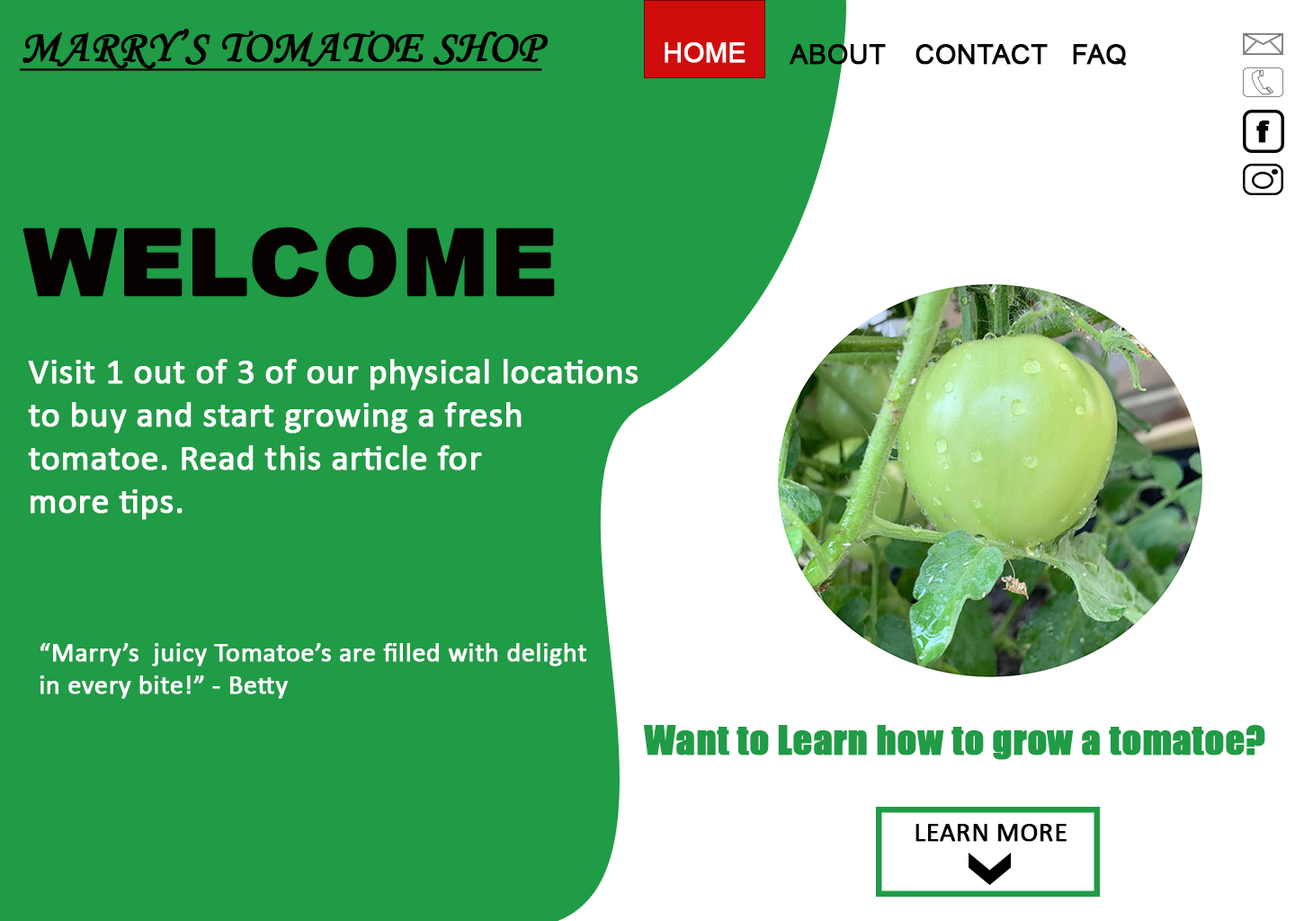
<style>
.page{position:relative;width:1295px;height:921px;background:#209b46}
.page>*{position:absolute;margin:0}
.t1{font:45.5px "MonotypeCorsiva";color:#060000;text-transform:uppercase;font-weight:bold;text-decoration:underline}
.t2{font:27px "ArialMT";color:#ffffff;font-weight:bold}
.t3{font:27px "ArialMT";color:#060000;font-weight:bold}
.t4{font:29.9px "Arial-Black";color:#060000;font-weight:bold}
.t5{font:91.7px "Arial-Black";color:#060000;font-weight:bold}
.t6{font:36px "Calibri";color:#ffffff;font-weight:bold}
.t7{font:27px "Calibri";color:#ffffff;font-weight:bold}
.t8{font:37.8px "Impact";color:#209b46;font-weight:bold}
.t9{font:27px "Calibri";color:#060000;font-weight:bold}
</style>
<div class="page">
<p class="t1" style="left:20px;top:29px;width:528px;height:42px">Marry’s Tomatoe Shop</p>
<p class="t2" style="left:665px;top:42px;width:80px;height:21px">HOME</p>
<p class="t3" style="left:789px;top:44px;width:97px;height:21px">ABOUT</p>
<p class="t3" style="left:915px;top:44px;width:133px;height:21px">CONTACT</p>
<p class="t3" style="left:1073px;top:44px;width:53px;height:22px">FAQ</p>
<p class="t4" style="left:1256px;top:121px;width:14px;height:22px">f</p>
<p class="t5" style="left:22px;top:227px;width:533px;height:71px">WELCOME</p>
<p class="t6" style="left:28px;top:359px;width:610px;height:161px">Visit 1 out of 3 of our physical locations<br>to buy and start growing a fresh <br>tomatoe. Read this article for <br>more tips.</p>
<p class="t7" style="left:40px;top:643px;width:546px;height:56px">“Marry’s  juicy Tomatoe’s are filled with delight <br>in every bite!” - Betty</p>
<p class="t8" style="left:643px;top:725px;width:622px;height:35px">Want to Learn how to grow a tomatoe?</p>
<p class="t9" style="left:915px;top:824px;width:152px;height:18px">LEARN MORE</p>
</div>
